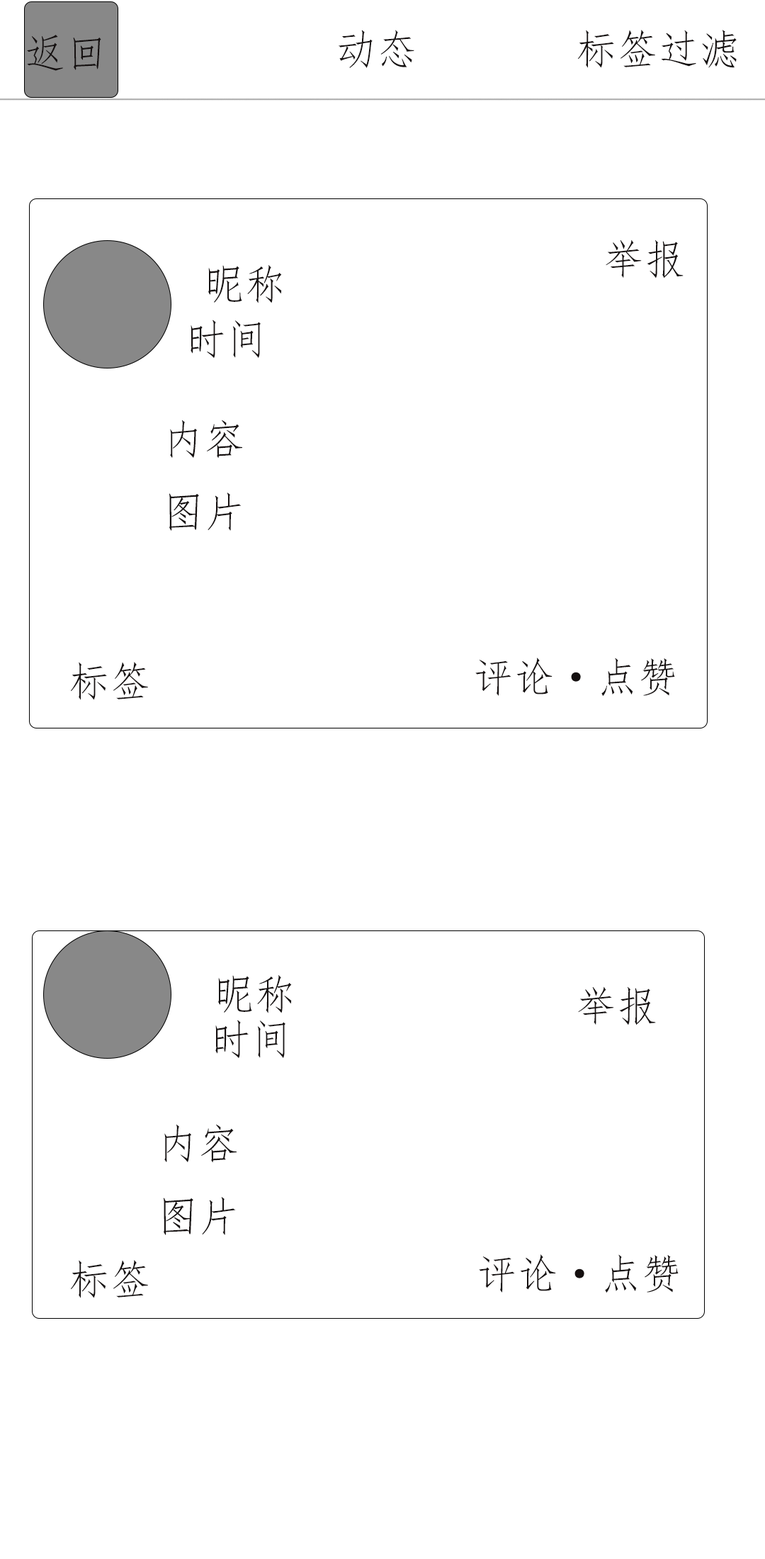
<style>
.page{position:relative;width:765px;height:1559px;background:#ffffff}
.page>*{position:absolute;margin:0}
.t1{font:41.3px "FangSong";color:#151010}
</style>
<div class="page">
<p class="t1" style="left:338px;top:30px;width:76px;height:38px">动态</p>
<p class="t1" style="left:578px;top:30px;width:159px;height:38px">标签过滤</p>
<p class="t1" style="left:27px;top:35px;width:74px;height:36px">返回</p>
<p class="t1" style="left:606px;top:239px;width:78px;height:39px">举报</p>
<p class="t1" style="left:208px;top:265px;width:74px;height:38px">昵称</p>
<p class="t1" style="left:191px;top:319px;width:70px;height:39px">时间</p>
<p class="t1" style="left:169px;top:419px;width:73px;height:112px">内容<br>图片</p>
<p class="t1" style="left:71px;top:662px;width:77px;height:38px">标签</p>
<p class="t1" style="left:475px;top:657px;width:200px;height:39px">评论·点赞</p>
<p class="t1" style="left:218px;top:975px;width:74px;height:38px">昵称</p>
<p class="t1" style="left:578px;top:986px;width:78px;height:39px">举报</p>
<p class="t1" style="left:215px;top:1019px;width:70px;height:39px">时间</p>
<p class="t1" style="left:163px;top:1124px;width:74px;height:111px">内容<br>图片</p>
<p class="t1" style="left:479px;top:1254px;width:200px;height:39px">评论·点赞</p>
<p class="t1" style="left:71px;top:1260px;width:77px;height:38px">标签</p>
</div>
